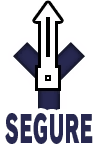
<style>
.page{position:relative;width:98px;height:150px;background:#ffffff}
.page>*{position:absolute;margin:0}
.t1{font:37.3px "RodinNTLGPro-UB";color:#272850;scale:0.53 1}
</style>
<div class="page">
<p class="t1" style="left:5px;top:113px;width:88px;height:31px">SEGURE</p>
</div>
